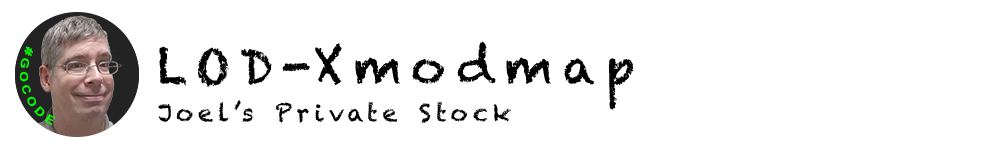
<style>
.page{position:relative;width:1000px;height:150px;background:#ffffff}
.page>*{position:absolute;margin:0}
.t1{font:48px "Chalkduster";letter-spacing:0.2em;color:#000000}
.t2{font:11.2px "Arial-BoldMT";letter-spacing:0.2em;color:#00ff00}
.t3{font:24px "Chalkduster";letter-spacing:0.2em;color:#000000}
</style>
<div class="page">
<p class="t1" style="left:159px;top:41px;width:475px;height:69px">LOD-Xmodmap</p>
<p class="t2" style="left:19px;top:46px;width:37px;height:80px;rotate:72deg">#GOCODE</p>
<p class="t3" style="left:158px;top:100px;width:353px;height:23px">Joel’s Private Stock</p>
</div>
